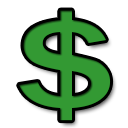
<style>
.page{position:relative;width:128px;height:128px;background:#ffffff}
.page>*{position:absolute;margin:0}
.t1{font:134.2px "FranklinGothic-Medium";color:#339933;scale:1.32 1}
</style>
<div class="page">
<p class="t1" style="left:19px;top:10px;width:92px;height:111px">$</p>
</div>
